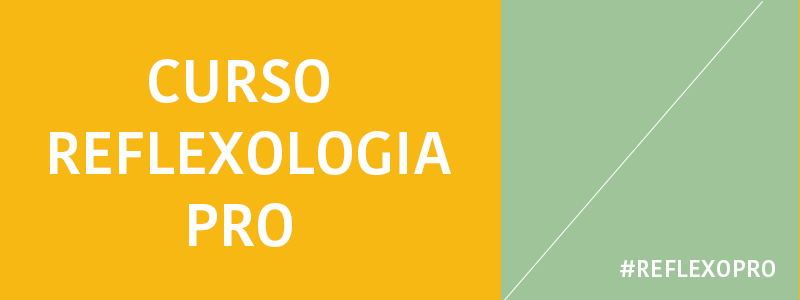
<style>
.page{position:relative;width:800px;height:300px;background:#f7b813}
.page>*{position:absolute;margin:0}
.t1{font:60px "KohinoorDevanagari-Medium";color:#ffffff}
.t2{font:24px "KohinoorDevanagari-Medium";color:#ffffff}
</style>
<div class="page">
<p class="t1" style="left:50px;top:59px;width:401px;height:188px;text-align:center">CURSO<br> REFLEXOLOGIA<br>PRO</p>
<p class="t2" style="left:620px;top:260px;width:155px;height:17px">#REFLEXOPRO</p>
</div>
